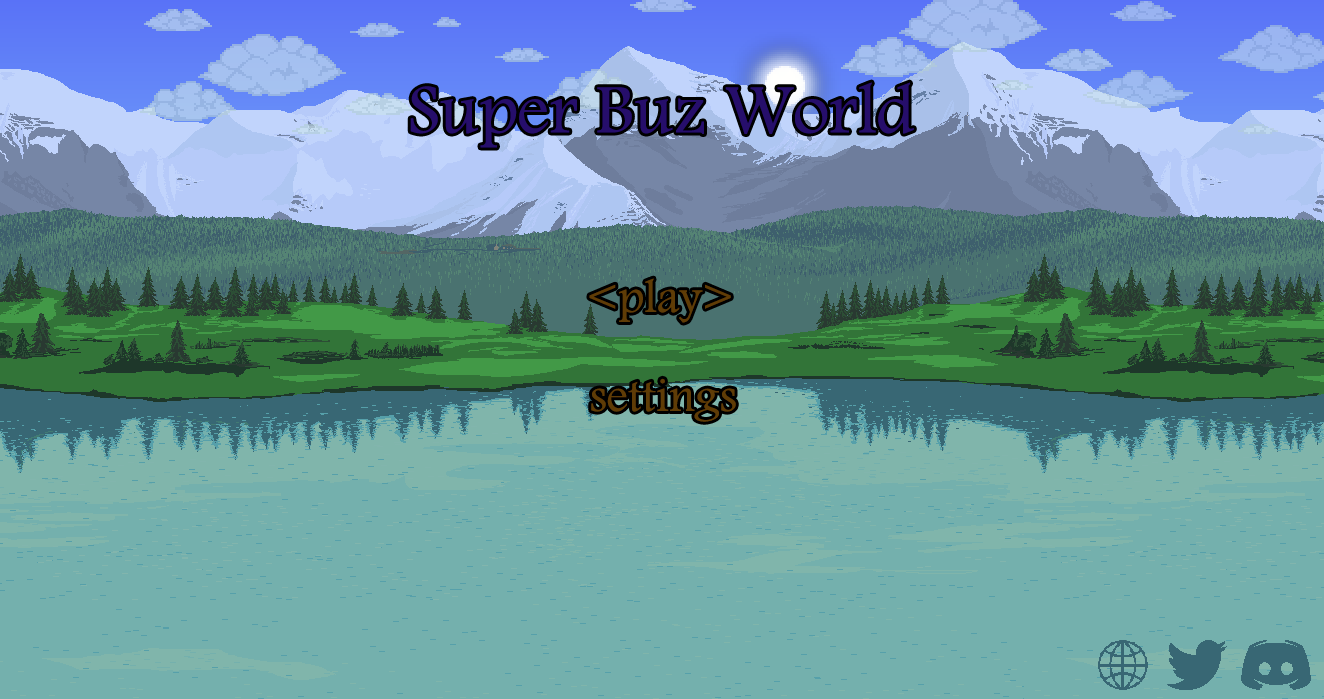
<style>
.page{position:relative;width:1324px;height:699px;background:#74b0ad}
.page>*{position:absolute;margin:0}
.t1{font:72px "Andalus";color:#260e6b}
.t2{font:48px "Andalus";color:#5f3c06}
</style>
<div class="page">
<p class="t1" style="left:410px;top:82px;width:504px;height:66px">Super Buz World</p>
<p class="t2" style="left:589px;top:278px;width:142px;height:45px">&lt;play&gt;</p>
<p class="t2" style="left:591px;top:378px;width:145px;height:44px">settings</p>
</div>
